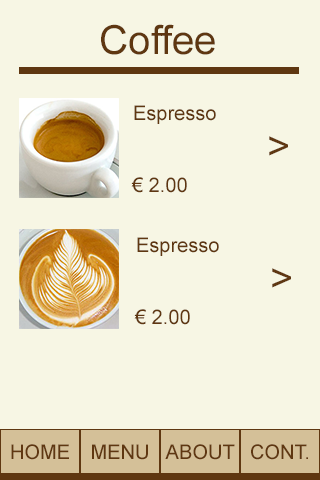
<style>
.page{position:relative;width:320px;height:480px;background:#f7f6e4}
.page>*{position:absolute;margin:0}
.t1{font:40px "ArialMT";color:#5f3711}
.t2{font:20px "ArialMT";color:#5f3711}
</style>
<div class="page">
<p class="t1" style="left:101px;top:24px;width:114px;height:31px">Coffee</p>
<p class="t2" style="left:134px;top:105px;width:82px;height:19px">Espresso</p>
<p class="t1" style="left:269px;top:136px;width:19px;height:20px">&gt;</p>
<p class="t2" style="left:131px;top:177px;width:56px;height:16px">€ 2.00</p>
<p class="t2" style="left:137px;top:237px;width:82px;height:19px">Espresso</p>
<p class="t1" style="left:272px;top:268px;width:19px;height:20px">&gt;</p>
<p class="t2" style="left:134px;top:309px;width:56px;height:16px">€ 2.00</p>
<p class="t2" style="left:11px;top:444px;width:58px;height:16px">HOME</p>
<p class="t2" style="left:92px;top:444px;width:56px;height:16px">MENU</p>
<p class="t2" style="left:165px;top:444px;width:70px;height:16px">ABOUT</p>
<p class="t2" style="left:251px;top:444px;width:57px;height:16px">CONT.</p>
</div>
